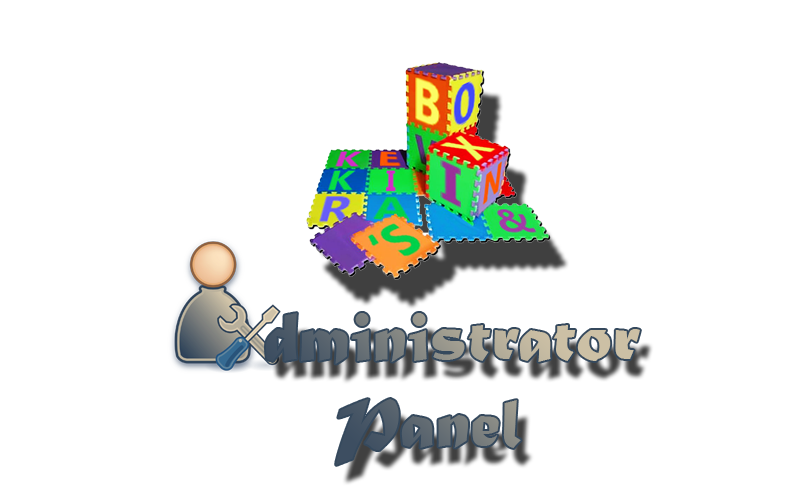
<style>
.page{position:relative;width:795px;height:500px;background:#ffffff}
.page>*{position:absolute;margin:0}
.t1{font:72px "MaturaMTScriptCapitals"}
</style>
<div class="page">
<p class="t1" style="left:266px;top:313px;width:374px;height:152px;text-align:center">dministrator<br>Panel</p>
</div>
